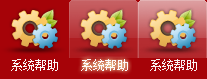
<style>
.page{position:relative;width:207px;height:79px;background:#a60308}
.page>*{position:absolute;margin:0}
.t1{font:12px "NSimSun";color:#fdfafa}
</style>
<div class="page">
<p class="t1" style="left:11px;top:59px;width:47px;height:12px">系统帮助</p>
<p class="t1" style="left:81px;top:59px;width:47px;height:12px">系统帮助</p>
<p class="t1" style="left:150px;top:59px;width:47px;height:12px">系统帮助</p>
</div>
